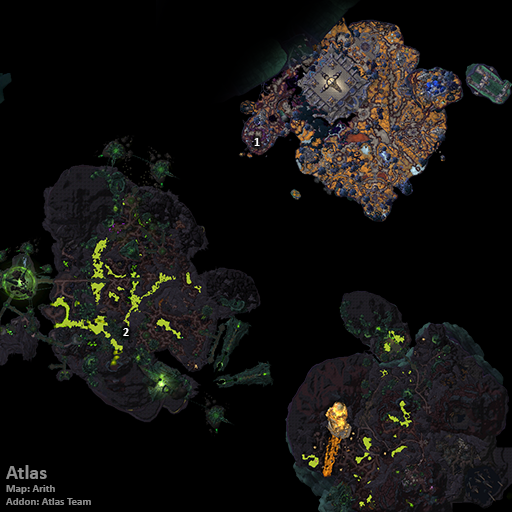
<style>
.page{position:relative;width:512px;height:512px;background:#000000}
.page>*{position:absolute;margin:0}
.t1{font:12px "Calibri-Bold";color:#ffffff}
.t2{font:11px "Calibri-Bold";color:#8d8d8d}
.t3{font:20px "Calibri-Bold";color:#8d8d8d}
</style>
<div class="page">
<p class="t1" style="left:254px;top:138px;width:6px;height:8px">1</p>
<p class="t1" style="left:123px;top:328px;width:6px;height:8px">2</p>
<p class="t2" style="left:6px;top:465px;width:85px;height:40px"><span class="t3">Atlas<br></span>Map: Arith<br>Addon: Atlas Team</p>
</div>
